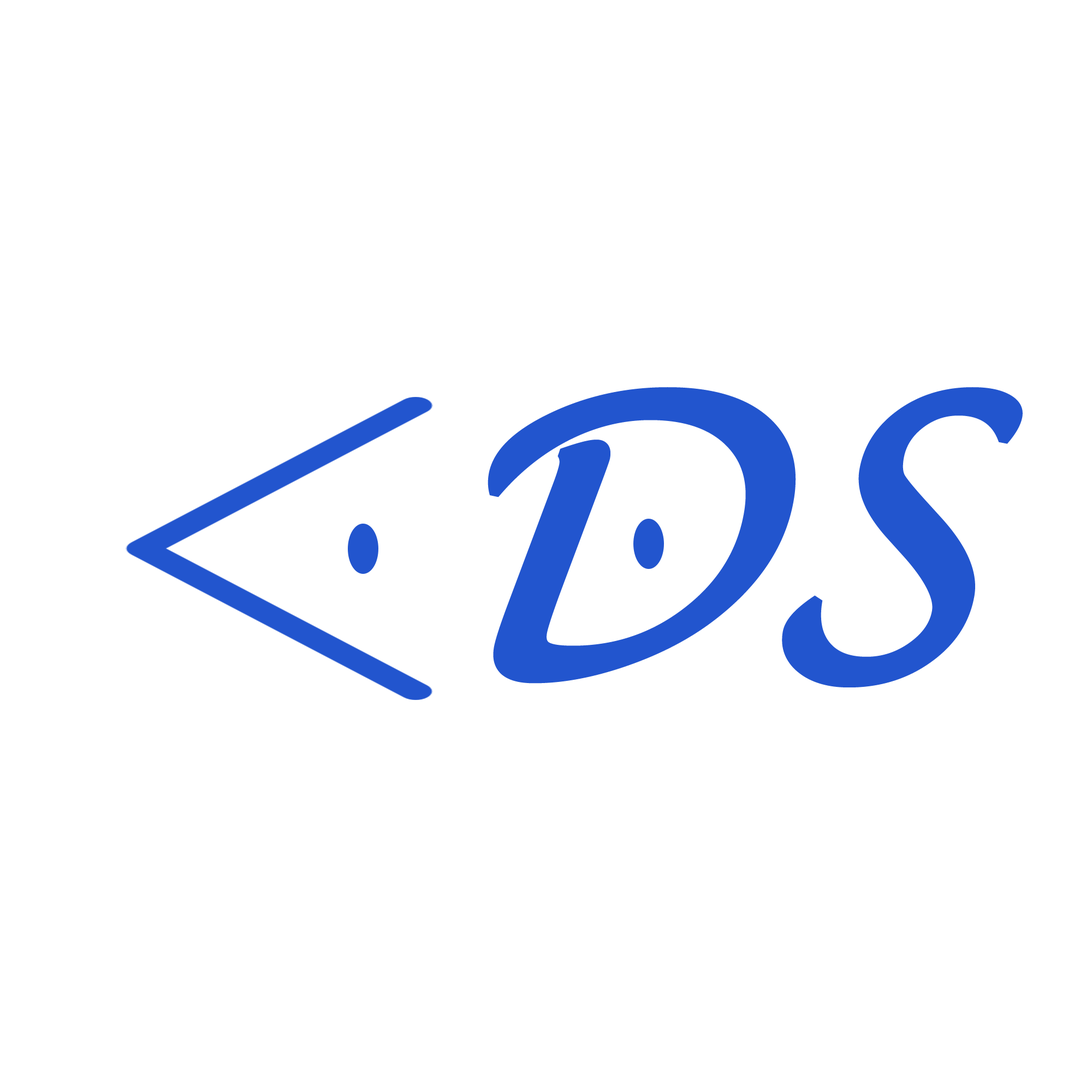
<style>
.page{position:relative;width:1092px;height:1092px;background:#ffffff}
.page>*{position:absolute;margin:0}
.t1{font:364px "LucidaHandwriting-Italic";letter-spacing:0.006em;color:#2255ce;font-weight:bold;font-style:italic}
</style>
<div class="page">
<p class="t1" style="left:488px;top:387px;width:535px;height:300px">DS</p>
</div>
